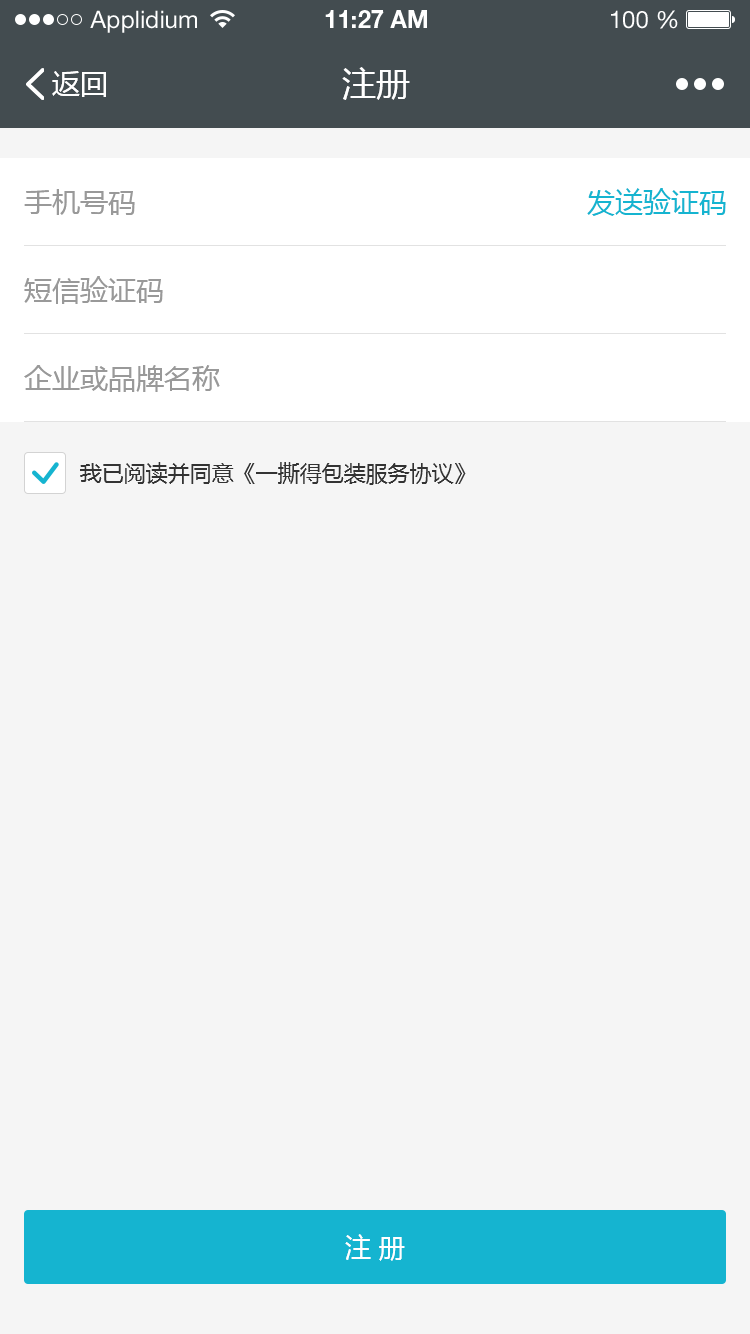
<style>
.page{position:relative;width:750px;height:1334px;background:#f5f5f5}
.page>*{position:absolute;margin:0}
.t1{font:24px "HelveticaNeueLTStd-Roman";color:#ffffff}
.t2{font:24px "HelveticaNeueLTStd-Bd";color:#ffffff}
.t3{font:28px "MicrosoftYaHei";color:#ffffff}
.t4{font:34px "MicrosoftYaHei";color:#ffffff}
.t5{font:28px "MicrosoftYaHei";color:#999999}
.t6{font:28px "MicrosoftYaHei";color:#15b4d0}
.t7{font:22px "MicrosoftYaHei";color:#333333}
.t8{font:26px "MicrosoftYaHei";letter-spacing:0.3em;color:#ffffff}
</style>
<div class="page">
<p class="t1" style="left:90px;top:10px;width:107px;height:23px">Applidium</p>
<p class="t2" style="left:325px;top:10px;width:102px;height:18px">11:27 AM</p>
<p class="t1" style="left:611px;top:10px;width:67px;height:19px">100 %</p>
<p class="t3" style="left:52px;top:71px;width:54px;height:26px">返回</p>
<p class="t4" style="left:342px;top:67px;width:68px;height:33px">注册</p>
<p class="t5" style="left:24px;top:189px;width:111px;height:26px">手机号码</p>
<p class="t6" style="left:587px;top:188px;width:139px;height:28px">发送验证码</p>
<p class="t5" style="left:24px;top:276px;width:139px;height:28px">短信验证码</p>
<p class="t5" style="left:24px;top:365px;width:196px;height:27px">企业或品牌名称</p>
<p class="t7" style="left:80px;top:462px;width:386px;height:23px">我已阅读并同意《一撕得包装服务协议》</p>
<p class="t8" style="left:345px;top:1234px;width:60px;height:27px">注册</p>
</div>
